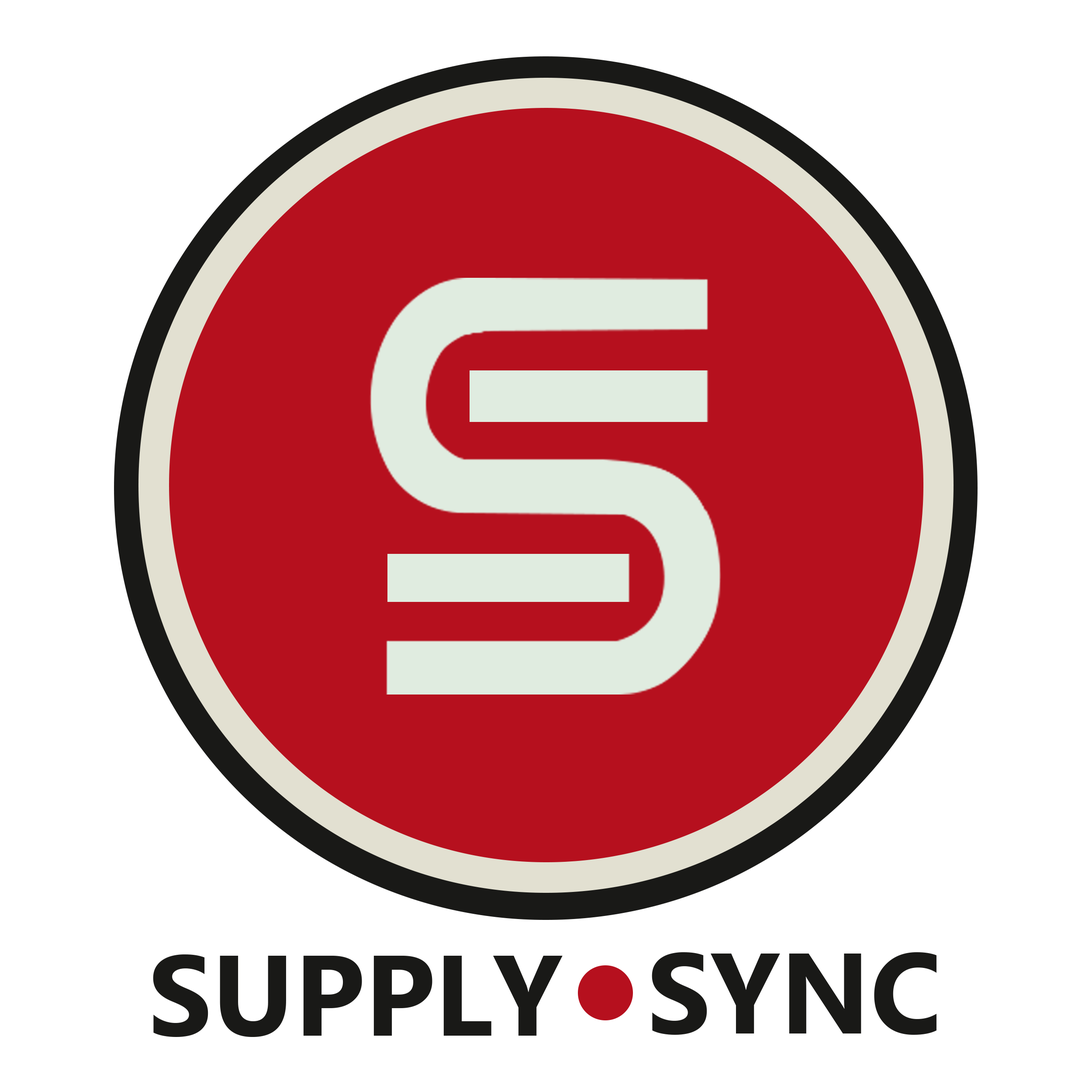
<style>
.page{position:relative;width:1092px;height:1092px;background:#ffffff}
.page>*{position:absolute;margin:0}
.t1{font:114.1px "Ebrima-Bold";color:#191917}
</style>
<div class="page">
<p class="t1" style="left:652px;top:952px;width:284px;height:83px">SYNC</p>
<p class="t1" style="left:153px;top:954px;width:410px;height:83px">SUPPLY</p>
</div>
